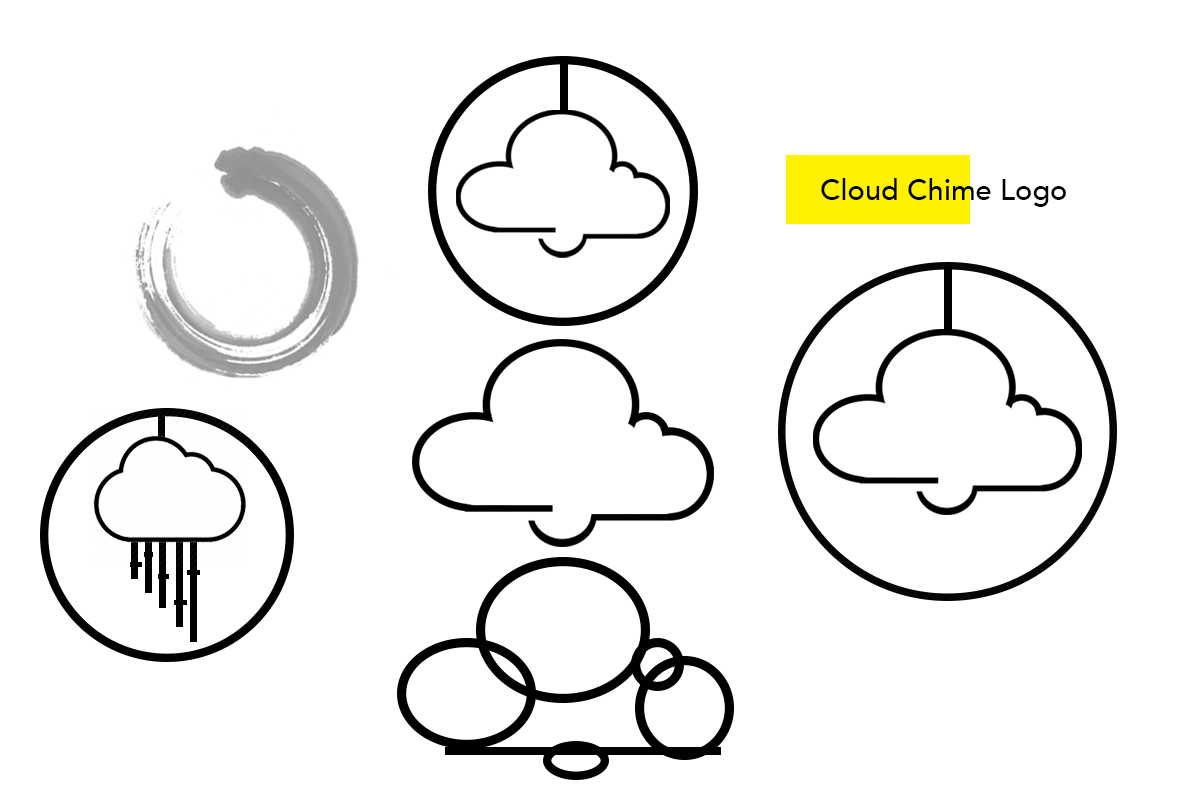
<style>
.page{position:relative;width:1200px;height:800px;background:#ffffff}
.page>*{position:absolute;margin:0}
.t1{font:29.2px "Avenir-Medium";color:#000000}
</style>
<div class="page">
<p class="t1" style="left:821px;top:178px;width:245px;height:29px">Cloud Chime Logo</p>
</div>
